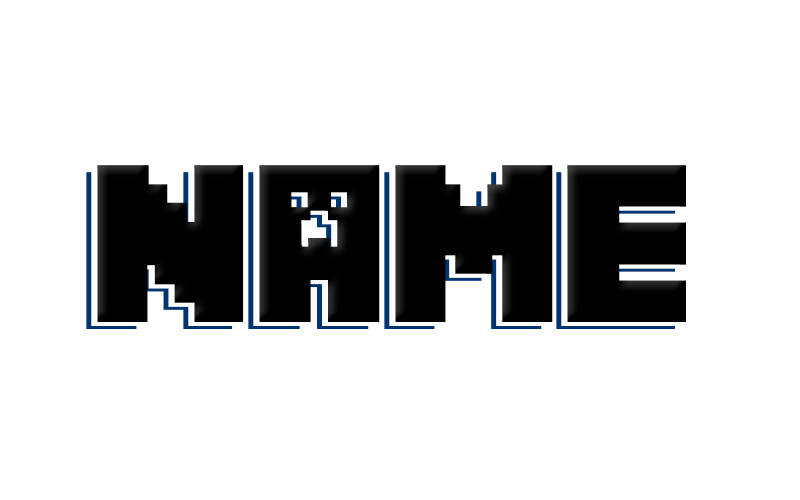
<style>
.page{position:relative;width:800px;height:500px;background:#ffffff}
.page>*{position:absolute;margin:0}
.t1{font:200px "Minecrafter";color:#000000}
</style>
<div class="page">
<p class="t1" style="left:86px;top:172px;width:589px;height:157px">Name</p>
<p class="t1" style="left:91px;top:169px;width:589px;height:157px">Name</p>
<p class="t1" style="left:97px;top:165px;width:589px;height:157px">Name</p>
</div>
